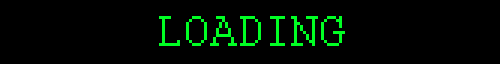
<style>
.page{position:relative;width:500px;height:64px;background:#000000}
.page>*{position:absolute;margin:0}
.t1{font:48px "Courier";color:#00ff24}
</style>
<div class="page">
<p class="t1" style="left:159px;top:16px;width:186px;height:30px">LOADING</p>
</div>
